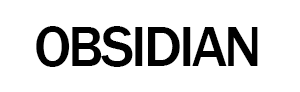
<style>
.page{position:relative;width:300px;height:92px;background:#ffffff}
.page>*{position:absolute;margin:0}
.t1{font:58.3px "FranklinGothic-Medium";letter-spacing:-0.05em;color:#000000}
</style>
<div class="page">
<p class="t1" style="left:36px;top:26px;width:222px;height:41px">OBSIDIAN</p>
</div>
